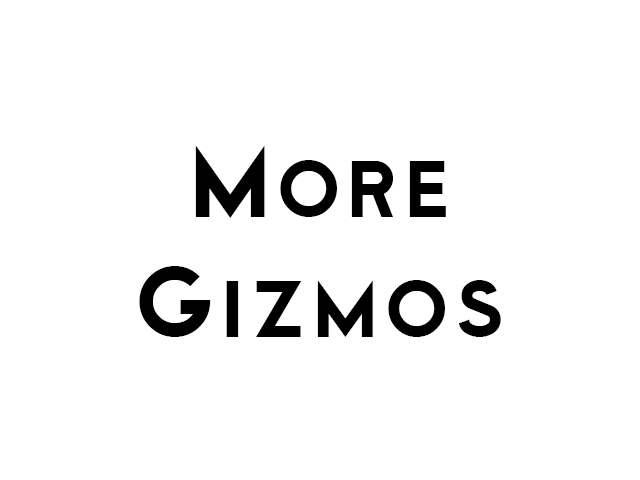
<style>
.page{position:relative;width:640px;height:480px;background:#ffffff}
.page>*{position:absolute;margin:0}
.t1{font:100px "Cityof";color:#000000}
</style>
<div class="page">
<p class="t1" style="left:139px;top:145px;width:362px;height:192px;text-align:center">More<br>Gizmos</p>
</div>
